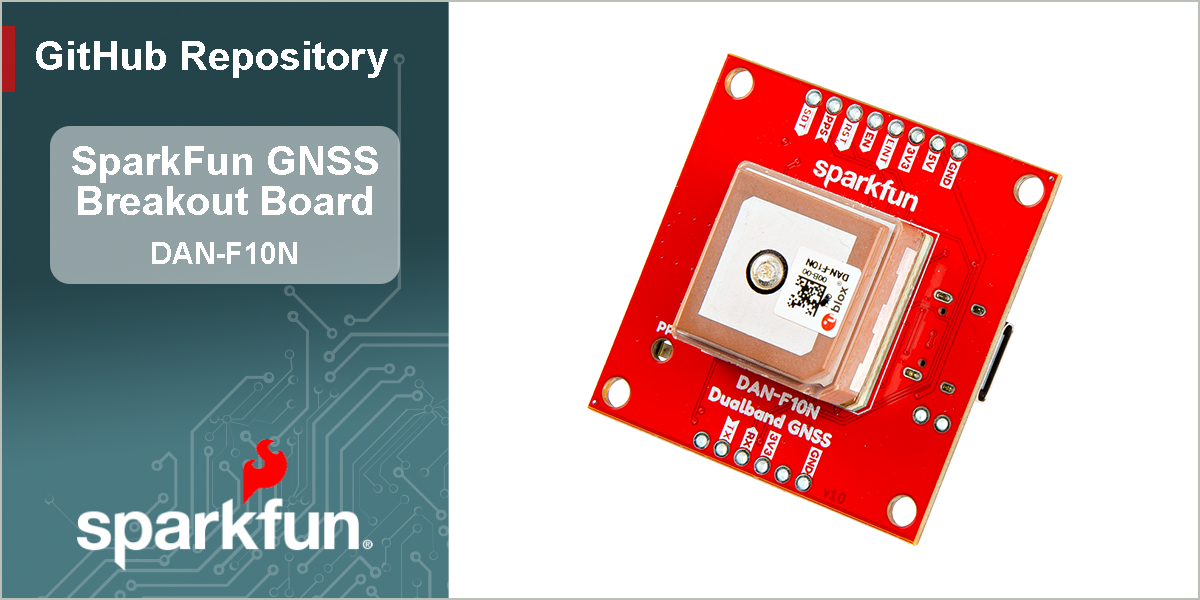
<style>
.page{position:relative;width:1200px;height:600px;background:#ffffff}
.page>*{position:absolute;margin:0}
.t1{font:40px "Arial-BoldMT";color:#ffffff}
.t2{font:30px "Arial-BoldMT";color:#ffffff}
</style>
<div class="page">
<p class="t1" style="left:36px;top:41px;width:352px;height:37px">GitHub Repository</p>
<p class="t1" style="left:72px;top:146px;width:306px;height:69px;text-align:center">SparkFun GNSS<br>Breakout Board</p>
<p class="t2" style="left:152px;top:242px;width:145px;height:22px">DAN-F10N</p>
</div>
